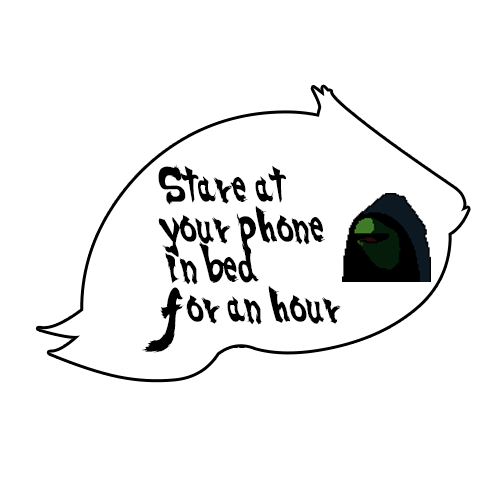
<style>
.page{position:relative;width:500px;height:500px;background:#ffffff}
.page>*{position:absolute;margin:0}
.t1{font:33.3px "SSF4-ABUKET-Regular";color:#000000;scale:0.75 1}
.t2{font:31px "SSF4-ABUKET-Regular";color:#000000;scale:0.8 1}
</style>
<div class="page">
<p class="t1" style="left:141px;top:164px;width:200px;height:189px"><span class="t2">S</span>tare at <br>your phone <br>in bed<br>for an hour</p>
</div>
